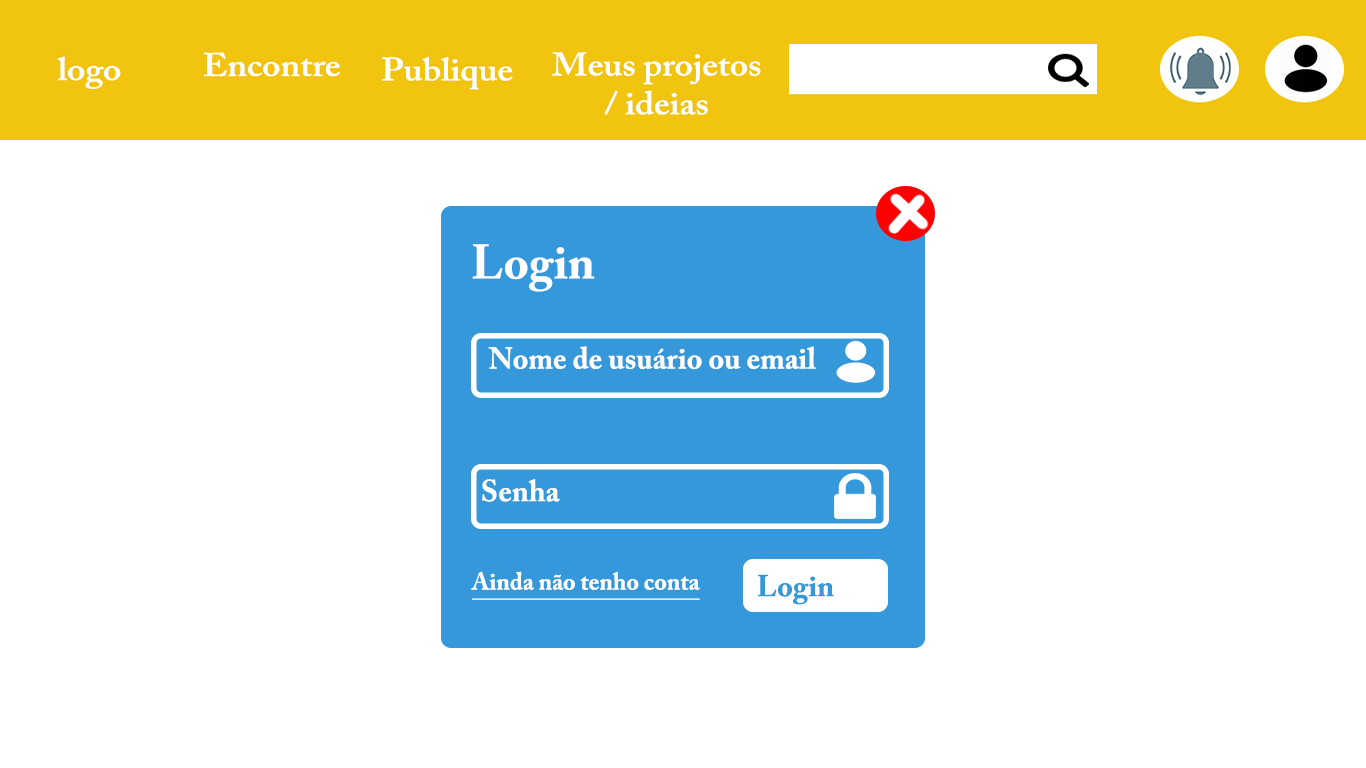
<style>
.page{position:relative;width:1366px;height:768px;background:#ffffff}
.page>*{position:absolute;margin:0}
.t1{font:48px "ACaslonPro-Bold";color:#ffffff}
.t2{font:30px "ACaslonPro-Bold";color:#ffffff}
.t3{font:24px "ACaslonPro-Bold";color:#ffffff;text-decoration:underline}
.t4{font:30px "ACaslonPro-Bold";color:#3498db}
</style>
<div class="page">
<p class="t1" style="left:472px;top:244px;width:123px;height:48px">Login</p>
<p class="t2" style="left:488px;top:346px;width:328px;height:23px">Nome de usuário ou email</p>
<p class="t2" style="left:482px;top:479px;width:78px;height:23px">Senha</p>
<p class="t3" style="left:471px;top:571px;width:229px;height:29px">Ainda não tenho conta</p>
<p class="t4" style="left:757px;top:574px;width:77px;height:31px">Login</p>
</div>
